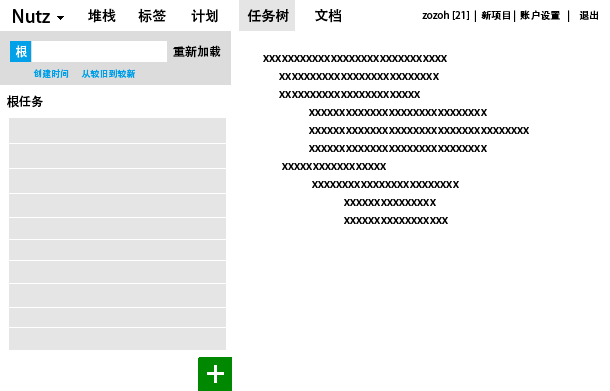
<style>
.page{position:relative;width:610px;height:391px;background:#ffffff}
.page>*{position:absolute;margin:0}
.t1{font:18px "AdobeHeitiStd-Regular";color:#000000}
.t2{font:14px "AdobeHeitiStd-Regular";color:#000000}
.t3{font:10px "AdobeHeitiStd-Regular";color:#000000}
.t4{font:12px "AdobeHeitiStd-Regular";color:#ffffff}
.t5{font:12px "AdobeHeitiStd-Regular";color:#000000}
.t6{font:12px/18px "AdobeHeitiStd-Regular";color:#000000}
.t7{font:9px "AdobeHeitiStd-Regular";color:#00a0e9}
</style>
<div class="page">
<p class="t1" style="left:13px;top:9px;width:37px;height:14px">Nutz</p>
<p class="t2" style="left:88px;top:8px;width:254px;height:15px">堆栈       标签        计划         任务树        文档</p>
<p class="t3" style="left:422px;top:10px;width:177px;height:12px">zozoh [21]  |  新项目 |  账户设置   |    退出</p>
<p class="t4" style="left:15px;top:45px;width:12px;height:13px">根</p>
<p class="t5" style="left:173px;top:45px;width:48px;height:13px">重新加载</p>
<p class="t6" style="left:263px;top:55px;width:266px;height:169px">xxxxxxxxxxxxxxxxxxxxxxxxxxxxxx<br>      xxxxxxxxxxxxxxxxxxxxxxxxxx<br>      xxxxxxxxxxxxxxxxxxxxxxx<br>                 xxxxxxxxxxxxxxxxxxxxxxxxxxxxx<br>                 xxxxxxxxxxxxxxxxxxxxxxxxxxxxxxxxxxxx<br>                 xxxxxxxxxxxxxxxxxxxxxxxxxxxxx<br>       xxxxxxxxxxxxxxxxx<br>                  xxxxxxxxxxxxxxxxxxxxxxxx<br>                              xxxxxxxxxxxxxxx<br>                              xxxxxxxxxxxxxxxxx</p>
<p class="t7" style="left:33px;top:69px;width:103px;height:9px">创建时间      从较旧到较新</p>
<p class="t5" style="left:7px;top:95px;width:36px;height:13px">根任务</p>
</div>
